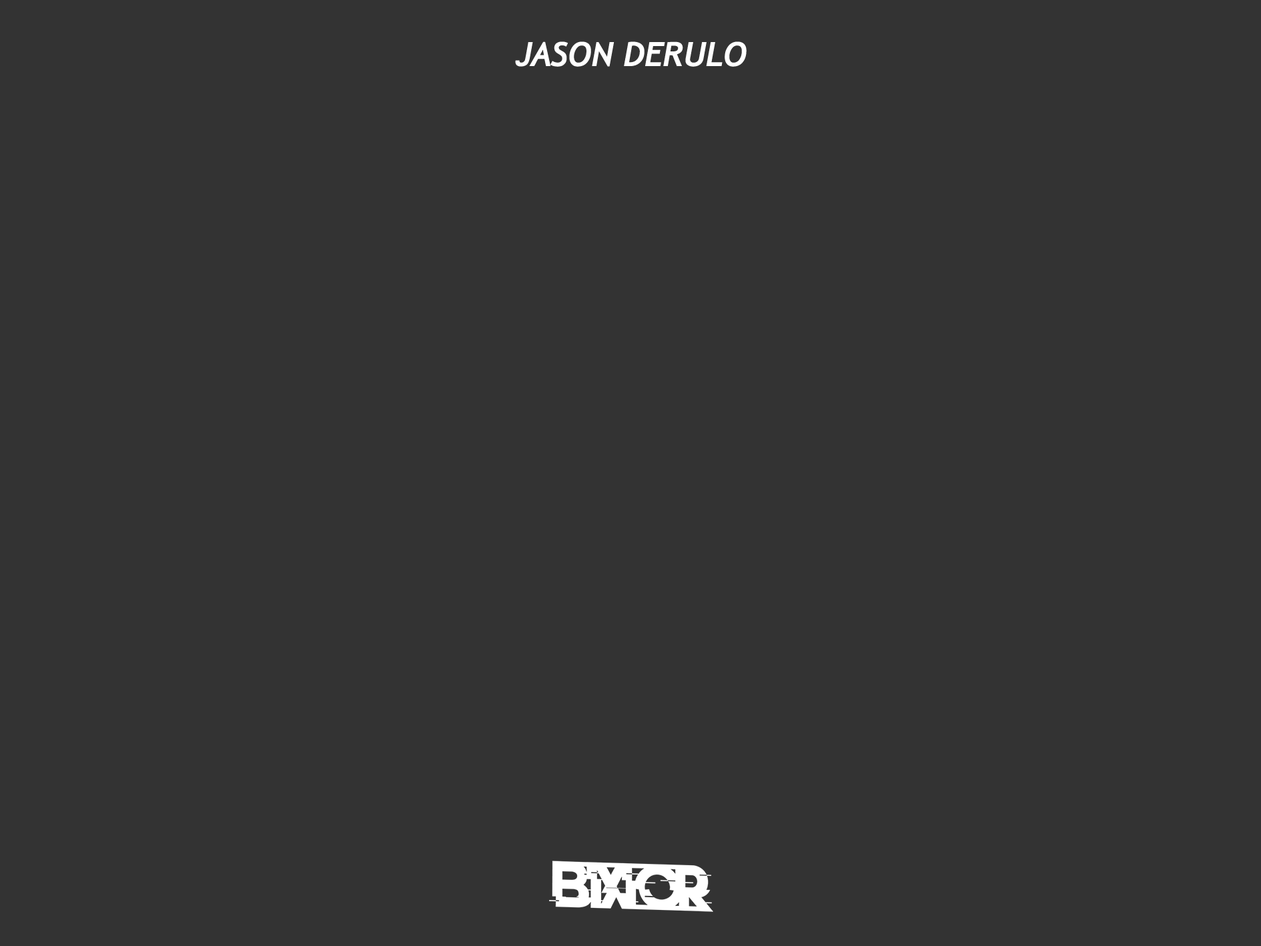
<style>
.page{position:relative;width:1261px;height:946px;background:#333333}
.page>*{position:absolute;margin:0}
.t1{font:33.4px "Trebuchet-BoldItalic";color:#ffffff;text-transform:uppercase}
</style>
<div class="page">
<p class="t1" style="left:515px;top:41px;width:232px;height:26px">Jason DErulo</p>
</div>
